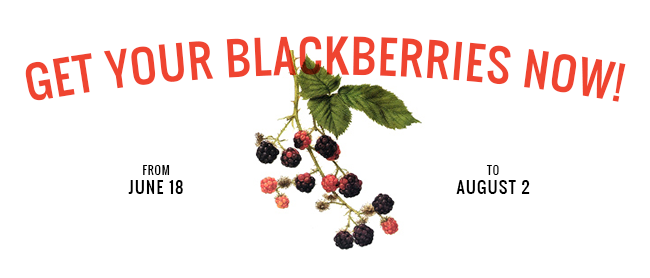
<style>
.page{position:relative;width:650px;height:278px;background:#ffffff}
.page>*{position:absolute;margin:0}
.t1{font:43.9px "Oswald-Regular";letter-spacing:0.04em;color:#ef4430}
.t2{font:16.1px "Oswald-Regular";letter-spacing:0.08em;color:#000000}
.t3{font:11px "Oswald-Regular";letter-spacing:0.08em;color:#000000}
</style>
<div class="page">
<p class="t1" style="left:25px;top:36px;width:601px;height:66px">GET YOUR BLACKBERRIES NOW!</p>
<p class="t2" style="left:128px;top:165px;width:55px;height:29px;text-align:center"><span class="t3">FROM<br></span>JUNE 18</p>
<p class="t2" style="left:456px;top:165px;width:74px;height:29px;text-align:center"><span class="t3">TO<br></span>AUGUST 2</p>
</div>
